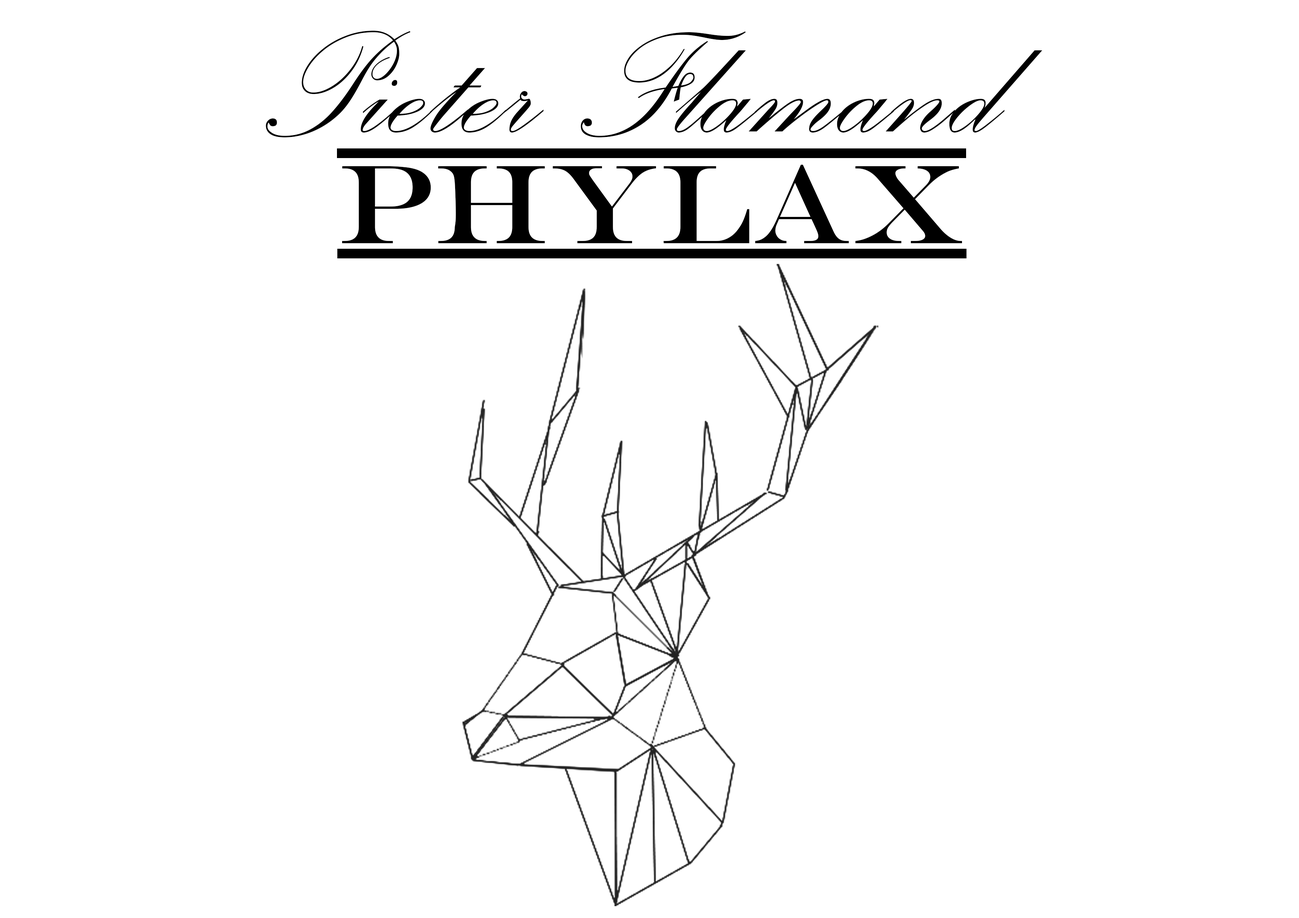
<style>
.page{position:relative;width:1299px;height:918px;background:#ffffff}
.page>*{position:absolute;margin:0}
.t1{font:190.2px "PalaceScriptMT";color:#000000}
.t2{font:112.8px "EngraversMT";color:#000000}
</style>
<div class="page">
<p class="t1" style="left:266px;top:31px;width:776px;height:106px">Pieter Flamand</p>
<p class="t2" style="left:342px;top:165px;width:620px;height:78px">Phylax</p>
</div>
